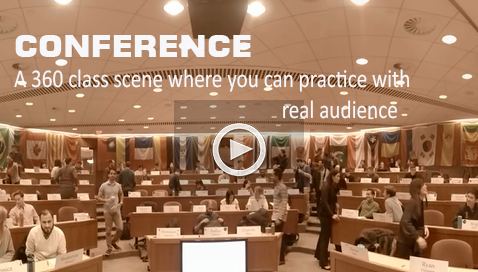
<style>
.page{position:relative;width:478px;height:272px}
.page>*{position:absolute;margin:0}
.t1{font:30px "Moire-ExtraBold";color:#f7f6f9}
.t2{font:25.7px "Calibri";color:#f7f6f9;scale:0.83 1}
</style>
<div class="page">
<p class="t1" style="left:15px;top:35px;width:236px;height:22px">CONFERENCE</p>
<p class="t2" style="left:14px;top:69px;width:396px;height:50px;text-align:center">A 360 class scene where you can practice with <br>              real audience</p>
</div>
